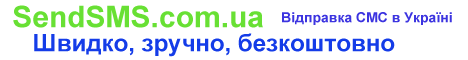
<style>
.page{position:relative;width:468px;height:60px;background:#ffffff}
.page>*{position:absolute;margin:0}
.t1{font:30px "Arial-BoldMT";color:#68e034}
.t2{font:14px "Arial-BoldMT";color:#3c34e0}
.t3{font:24px "Arial-BoldMT";color:#143ce8}
</style>
<div class="page">
<p class="t1" style="left:13px;top:5px;width:250px;height:23px">SendSMS.com.ua</p>
<p class="t2" style="left:282px;top:12px;width:170px;height:13px">Відправка СМС в Україні</p>
<p class="t3" style="left:34px;top:33px;width:361px;height:24px">Швидко, зручно, безкоштовно</p>
</div>
